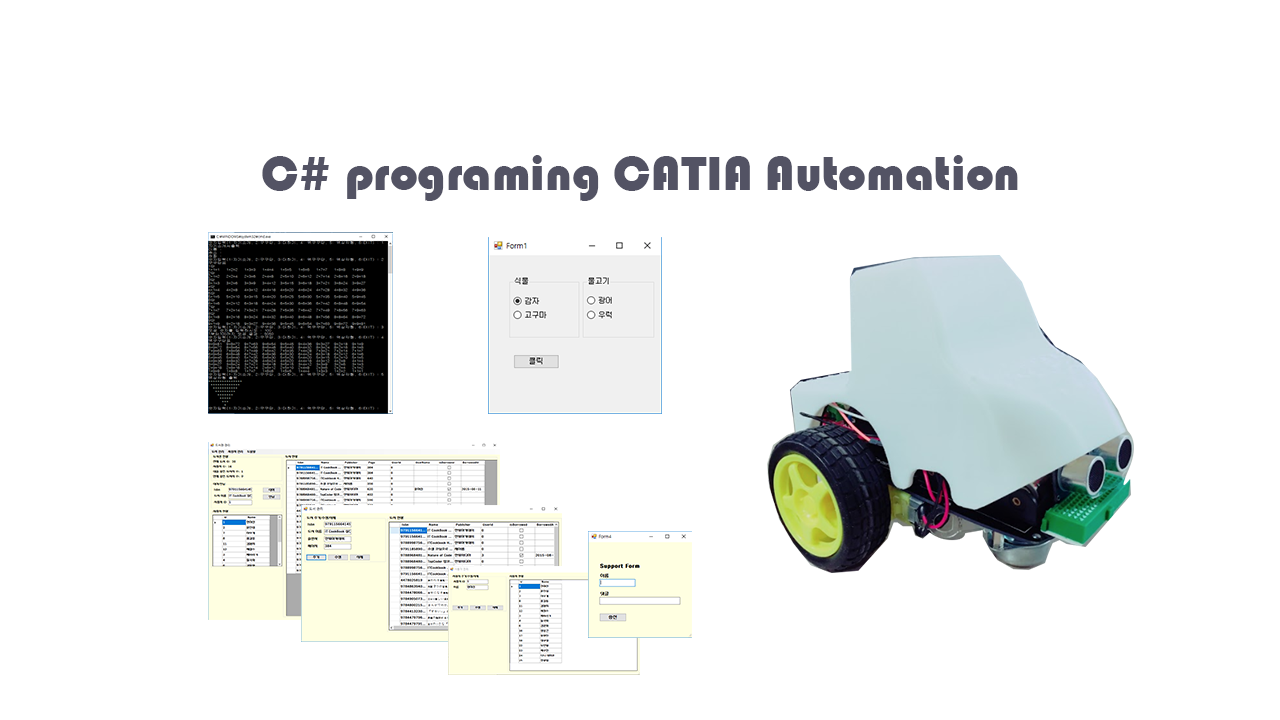
<style>
.page{position:relative;width:1280px;height:720px;background:#ffffff}
.page>*{position:absolute;margin:0}
.t1{font:12px "Bauhaus93";color:#535364}
</style>
<div class="page">
<p class="t1" style="left:262px;top:155px;width:756px;height:46px">C# programing CATIA Automation</p>
</div>
